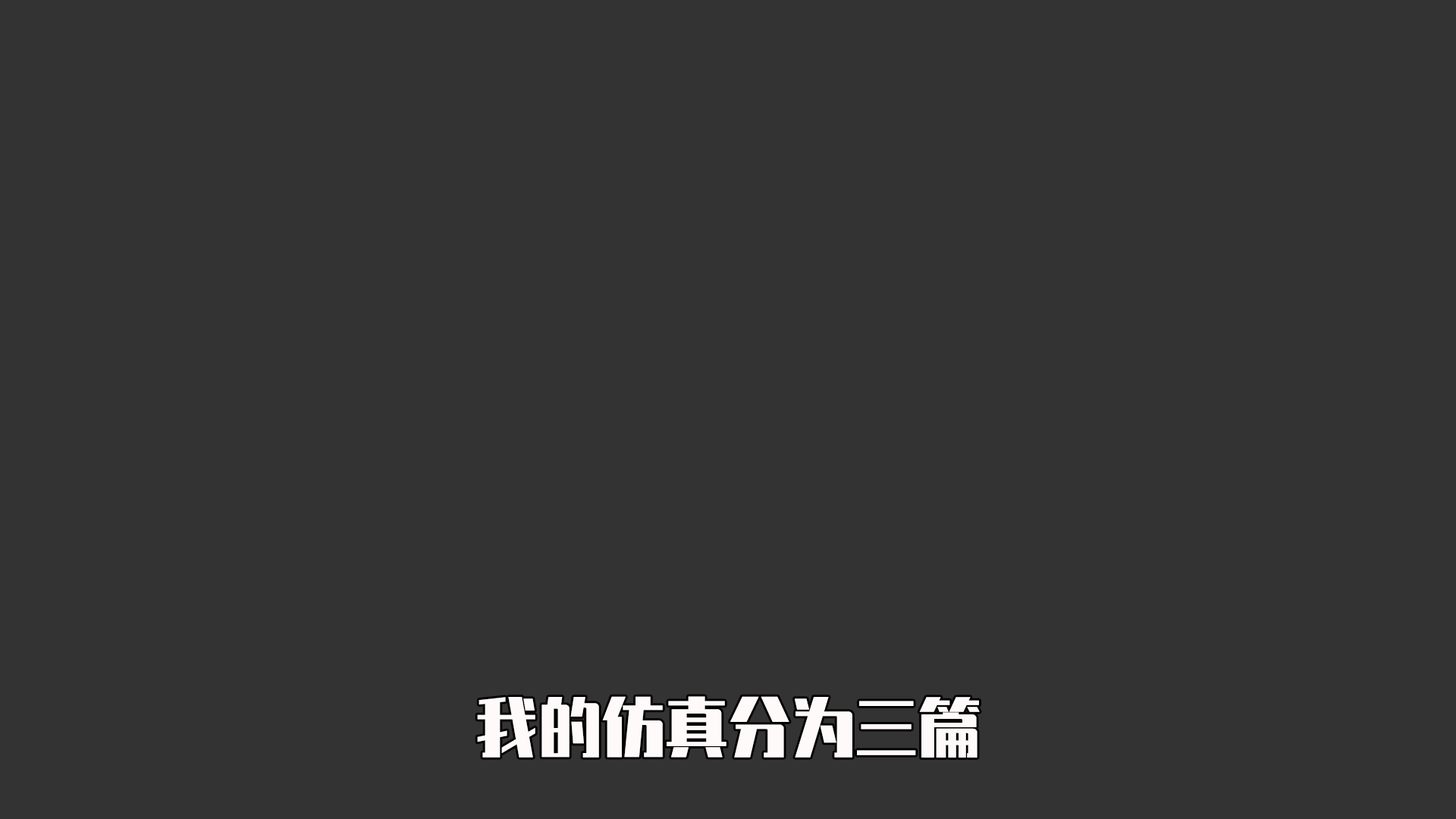
<style>
.page{position:relative;width:1456px;height:819px;background:#333333}
.page>*{position:absolute;margin:0}
.t1{font:63.2px "ZhenyanGB-Regular";color:#fefafa}
</style>
<div class="page">
<p class="t1" style="left:477px;top:696px;width:503px;height:62px">我的仿真分为三篇</p>
</div>
